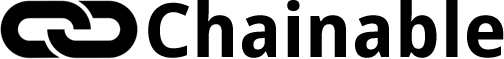
<style>
.page{position:relative;width:504px;height:59px;background:#ffffff}
.page>*{position:absolute;margin:0}
.t1{font:75px "DroidSans-Bold";color:#000000}
</style>
<div class="page">
<p class="t1" style="left:148px;top:0px;width:356px;height:58px">Chainable</p>
</div>
